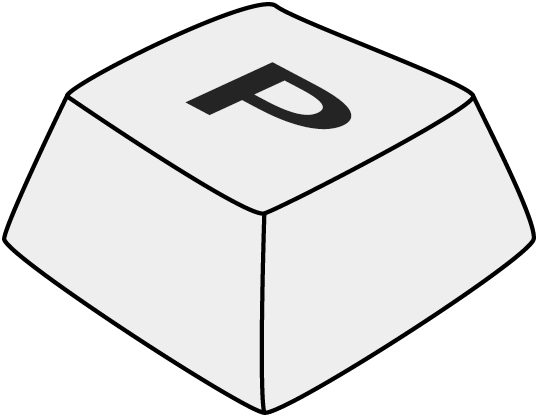
<style>
.page{position:relative;width:538px;height:417px;background:#eeeeee}
.page>*{position:absolute;margin:0}
.t1{font:134px "OpenSans-SemiBold";color:#242424;scale:1.73 1}
</style>
<div class="page">
<p class="t1" style="left:185px;top:62px;width:167px;height:68px;rotate:28deg">P</p>
</div>
